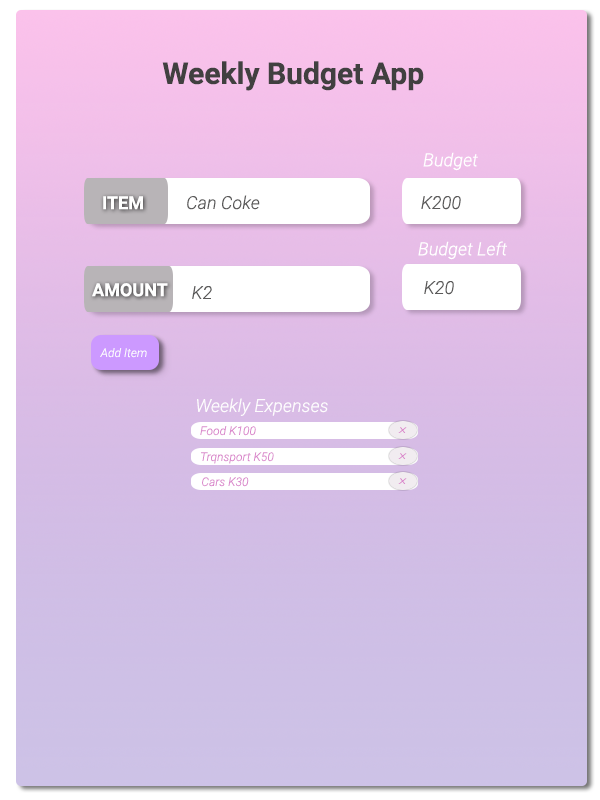
<style>
.page{position:relative;width:600px;height:800px}
.page>*{position:absolute;margin:0}
.t1{font:30px "Roboto-Bold";color:#414040}
.t2{font:18px "Roboto-LightItalic";color:#ffffff}
.t3{font:18px "Roboto-Bold";color:#ffffff}
.t4{font:18px "Roboto-LightItalic";color:#5b5a5a}
.t5{font:12px "Roboto-LightItalic";color:#fdfcfd}
.t6{font:18px "Roboto-LightItalic";color:#fdfcfd}
.t7{font:12px "Roboto-LightItalic";color:#da87cb}
.t8{font:8px "Roboto-LightItalic";color:#da87cb;scale:1.5 1}
</style>
<div class="page">
<p class="t1" style="left:162px;top:61px;width:262px;height:30px">Weekly Budget App</p>
<p class="t2" style="left:423px;top:152px;width:55px;height:19px">Budget</p>
<p class="t3" style="left:103px;top:196px;width:40px;height:14px">ITEM</p>
<p class="t4" style="left:187px;top:195px;width:73px;height:15px">Can Coke</p>
<p class="t4" style="left:421px;top:196px;width:40px;height:14px">K200</p>
<p class="t2" style="left:418px;top:241px;width:89px;height:19px">Budget Left</p>
<p class="t4" style="left:424px;top:281px;width:30px;height:14px">K20</p>
<p class="t3" style="left:92px;top:283px;width:76px;height:14px">AMOUNT</p>
<p class="t4" style="left:192px;top:286px;width:20px;height:13px">K2</p>
<p class="t5" style="left:100px;top:348px;width:47px;height:10px">Add Item</p>
<p class="t6" style="left:197px;top:398px;width:131px;height:18px">Weekly Expenses</p>
<p class="t7" style="left:200px;top:426px;width:56px;height:10px">Food K100</p>
<p class="t8" style="left:398px;top:427px;width:9px;height:6px">X</p>
<p class="t7" style="left:201px;top:452px;width:73px;height:12px">Trqnsport K50</p>
<p class="t8" style="left:398px;top:453px;width:9px;height:6px">X</p>
<p class="t7" style="left:202px;top:477px;width:47px;height:10px">Cars K30</p>
<p class="t8" style="left:398px;top:478px;width:9px;height:6px">X</p>
</div>
